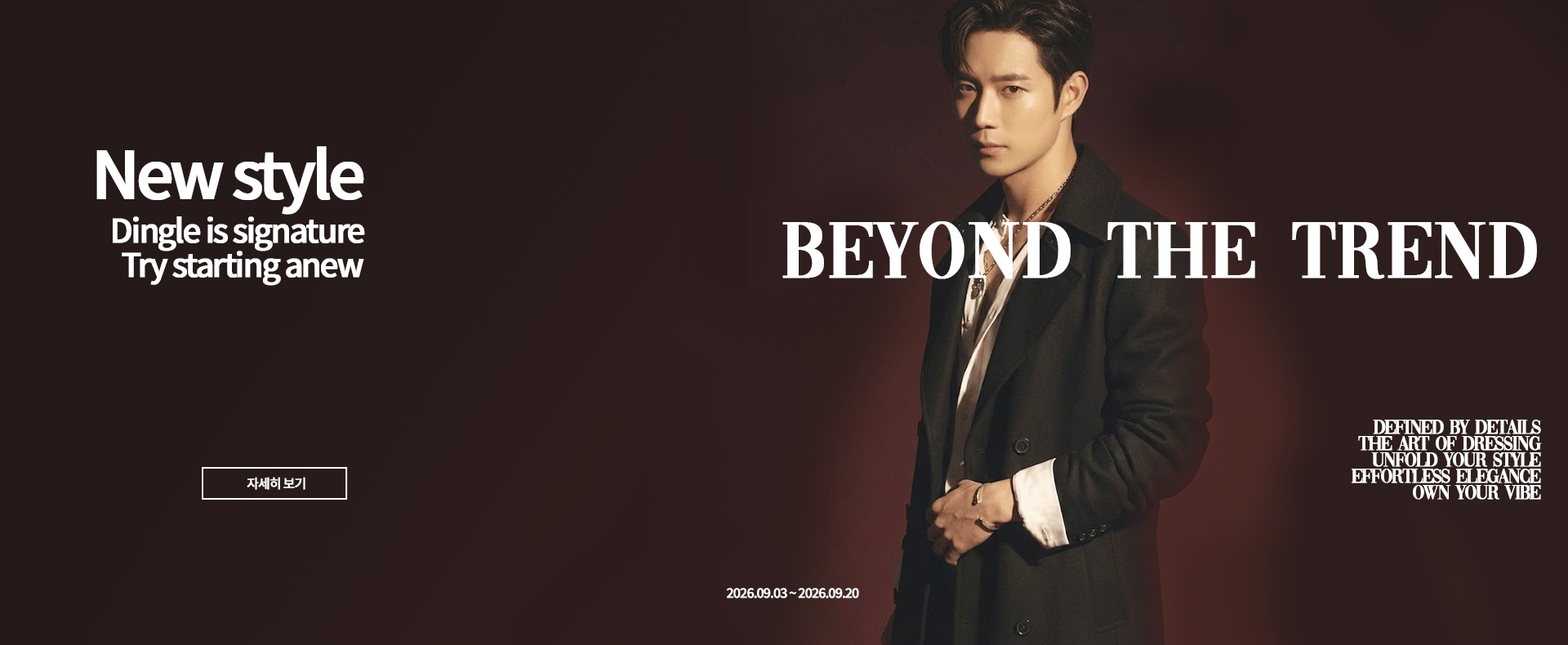
<style>
.page{position:relative;width:1568px;height:645px}
.page>*{position:absolute;margin:0}
.t1{font:65.3px "NotoSansKR-Medium";letter-spacing:-0.08em;color:#ffffff;font-weight:bold}
.t2{font:32.7px "NotoSansKR-Medium";letter-spacing:-0.08em;color:#ffffff;font-weight:bold}
.t3{font:81.7px "Vogue-Regular";color:#ffffff;font-weight:bold}
.t4{font:20.4px "Vogue-Regular";letter-spacing:-0.08em;color:#ffffff;font-weight:bold}
.t5{font:13.1px "NotoSansKR-Medium";letter-spacing:-0.08em;color:#ffffff;font-weight:bold}
</style>
<div class="page">
<p class="t1" style="left:96px;top:146px;width:268px;height:69px">New style</p>
<p class="t2" style="left:113px;top:216px;width:252px;height:36px">Dingle is signature</p>
<p class="t3" style="left:782px;top:221px;width:755px;height:58px">Beyond the Trend</p>
<p class="t2" style="left:122px;top:251px;width:242px;height:35px">Try starting anew</p>
<p class="t4" style="left:1373px;top:420px;width:168px;height:14px">Defined by Details</p>
<p class="t4" style="left:1358px;top:436px;width:184px;height:15px">The Art of Dressing</p>
<p class="t4" style="left:1371px;top:452px;width:170px;height:15px">Unfold Your Style</p>
<p class="t4" style="left:1352px;top:469px;width:189px;height:14px">Effortless Elegance</p>
<p class="t5" style="left:247px;top:477px;width:58px;height:13px">자세히 보기</p>
<p class="t4" style="left:1413px;top:485px;width:128px;height:15px">Own Your Vibe</p>
<p class="t5" style="left:726px;top:588px;width:133px;height:11px">2026.09.03 ~ 2026.09.20</p>
</div>
